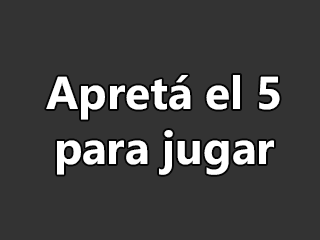
<style>
.page{position:relative;width:320px;height:240px;background:#333333}
.page>*{position:absolute;margin:0}
.t1{font:46px "SegoeUI-Bold";color:#ffffff}
</style>
<div class="page">
<p class="t1" style="left:46px;top:75px;width:234px;height:100px;text-align:center">Apretá el 5<br>para jugar</p>
</div>
